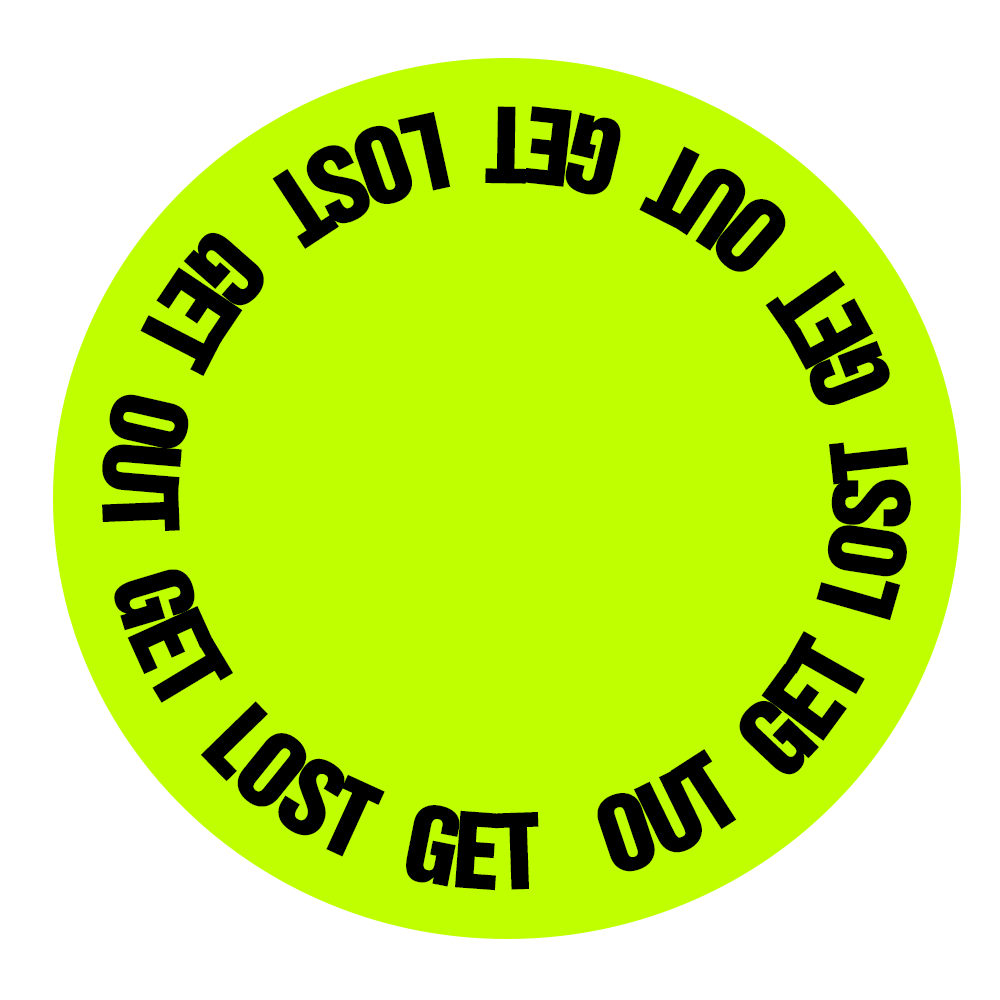
<style>
.page{position:relative;width:1000px;height:1000px;background:#bfff00}
.page>*{position:absolute;margin:0}
.t1{font:96px/70.1px "HelveticaInserat";color:#000000}
</style>
<div class="page">
<p class="t1" style="left:102px;top:106px;width:809px;height:785px">GET  OUT  GET  LOST  GET   OUT  GET  LOST  GET  OUT  GET  LOST</p>
</div>
